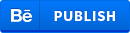
<style>
.page{position:relative;width:130px;height:33px}
.page>*{position:absolute;margin:0}
.t1{font:15px "SourceSansPro-Bold";letter-spacing:0.04em;color:#ffffff}
</style>
<div class="page">
<p class="t1" style="left:54px;top:11px;width:61px;height:10px">PUBLISH</p>
</div>
